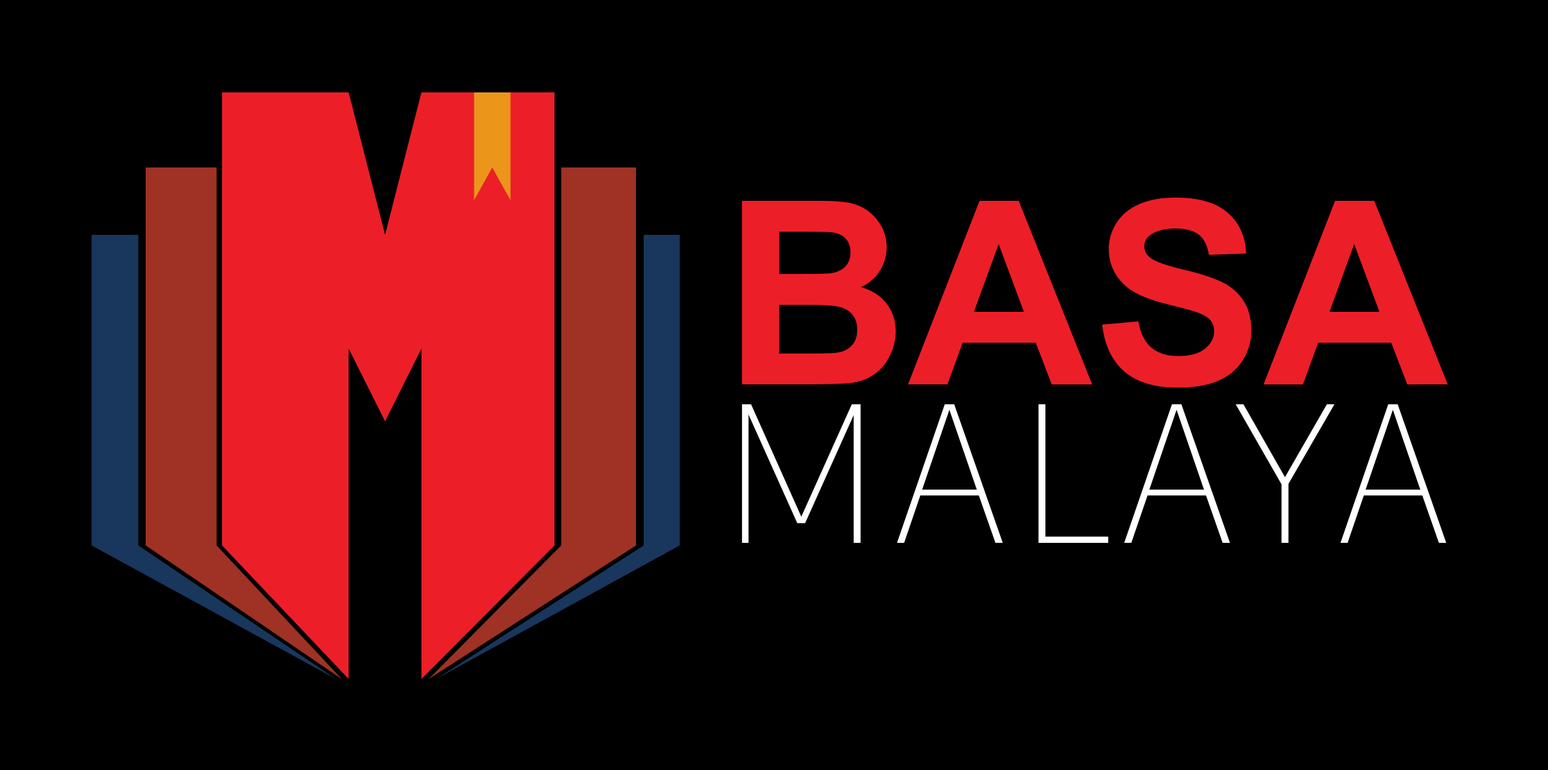
<style>
.page{position:relative;width:1548px;height:770px;background:#000000}
.page>*{position:absolute;margin:0}
.t1{font:255.8px "Arial-BoldMT";color:#ec1f28}
.t2{font:197.9px "ArtifaktElement-Thin";color:#ffffff}
</style>
<div class="page">
<p class="t1" style="left:742px;top:198px;width:706px;height:190px">BASA</p>
<p class="t2" style="left:742px;top:404px;width:705px;height:139px">MALAYA</p>
</div>
